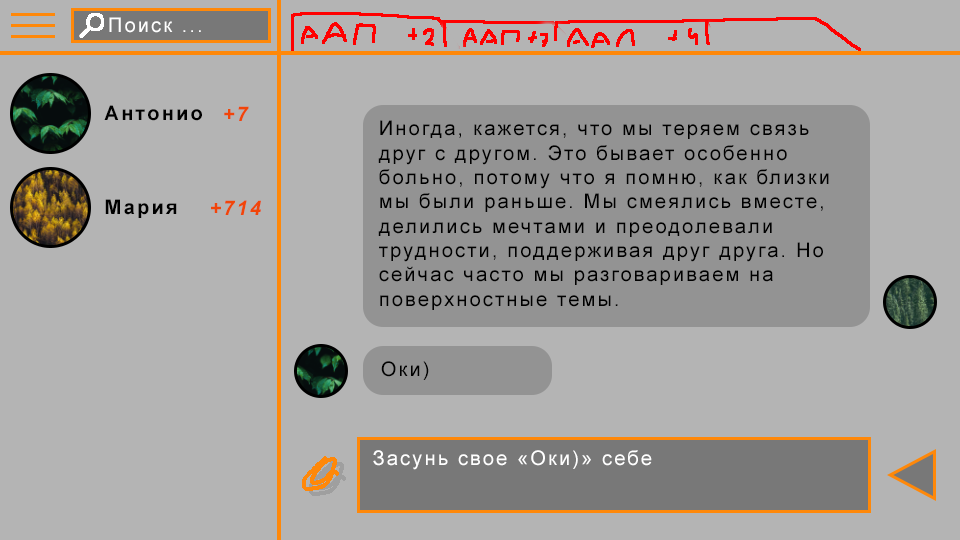
<style>
.page{position:relative;width:960px;height:540px;background:#b4b4b4}
.page>*{position:absolute;margin:0}
.t1{font:20.3px "ArialMT";letter-spacing:0.1em;color:#ffffff}
.t2{font:20.3px "Arial-BoldMT";letter-spacing:0.1em;color:#000000}
.t3{font:20.3px "Arial-BoldItalicMT";letter-spacing:0.1em;color:#f14509}
.t4{font:20.3px "ArialMT";letter-spacing:0.1em;color:#000000}
</style>
<div class="page">
<p class="t1" style="left:109px;top:17px;width:92px;height:16px">Поиск ...</p>
<p class="t2" style="left:104px;top:105px;width:98px;height:16px">Антонио</p>
<p class="t3" style="left:224px;top:106px;width:25px;height:15px">+7</p>
<p class="t4" style="left:378px;top:120px;width:451px;height:190px">Иногда, кажется, что мы теряем связь друг с другом. Это бывает особенно больно, потому что я помню, как близки мы были раньше. Мы смеялись вместе, делились мечтами и преодолевали трудности, поддерживая друг друга. Но сейчас часто мы разговариваем на поверхностные темы.</p>
<p class="t2" style="left:105px;top:199px;width:72px;height:19px">Мария</p>
<p class="t3" style="left:211px;top:200px;width:50px;height:15px">+714</p>
<p class="t4" style="left:381px;top:361px;width:48px;height:19px">Оки)</p>
<p class="t1" style="left:373px;top:450px;width:279px;height:20px">Засунь свое «Оки)» себе</p>
</div>
